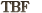
<style>
.page{position:relative;width:42px;height:13px;background:#ffffff}
.page>*{position:absolute;margin:0}
.t1{font:15px "RyuminPro-ExBold";letter-spacing:-0.06em;color:#4a3f32;font-weight:bold;scale:0.9 1}
</style>
<div class="page">
<p class="t1" style="left:0px;top:1px;width:30px;height:12px">TBF</p>
</div>
